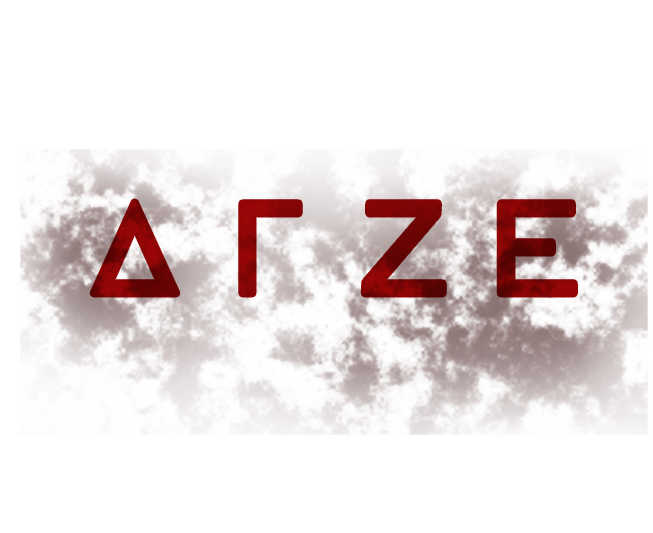
<style>
.page{position:relative;width:653px;height:533px;background:#ffffff}
.page>*{position:absolute;margin:0}
.t1{font:134.4px "SimHei"}
</style>
<div class="page">
<p class="t1" style="left:93px;top:202px;width:481px;height:92px">ΔΓΖΕ</p>
</div>
